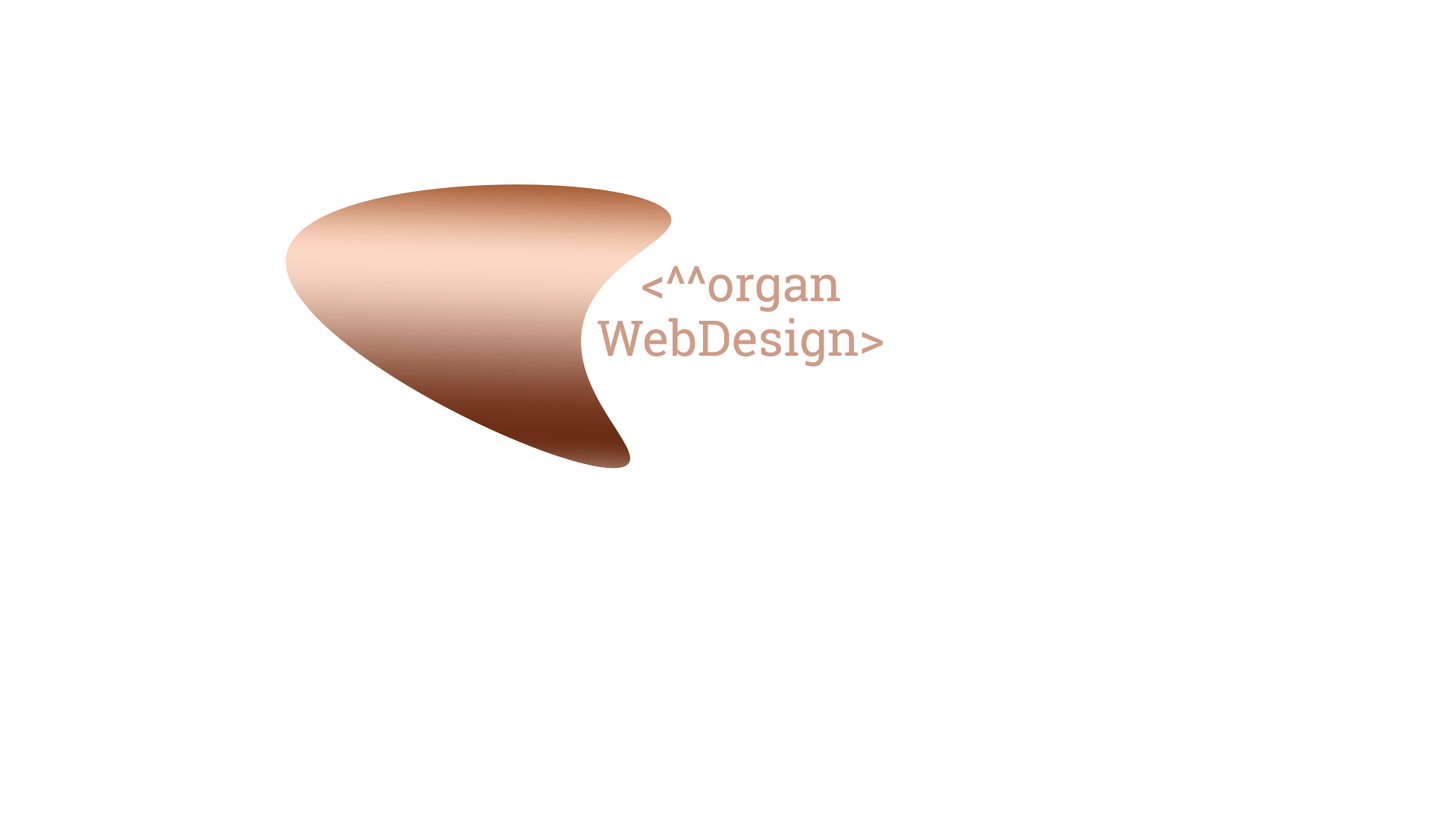
<style>
.page{position:relative;width:1456px;height:819px;background:#ffffff}
.page>*{position:absolute;margin:0}
.t1{font:49.3px/54.6px "RobotoSlab-Regular";color:#cd9c87}
</style>
<div class="page">
<p class="t1" style="left:598px;top:266px;width:285px;height:101px;text-align:center">&lt;^^organ<br>WebDesign&gt;</p>
</div>
